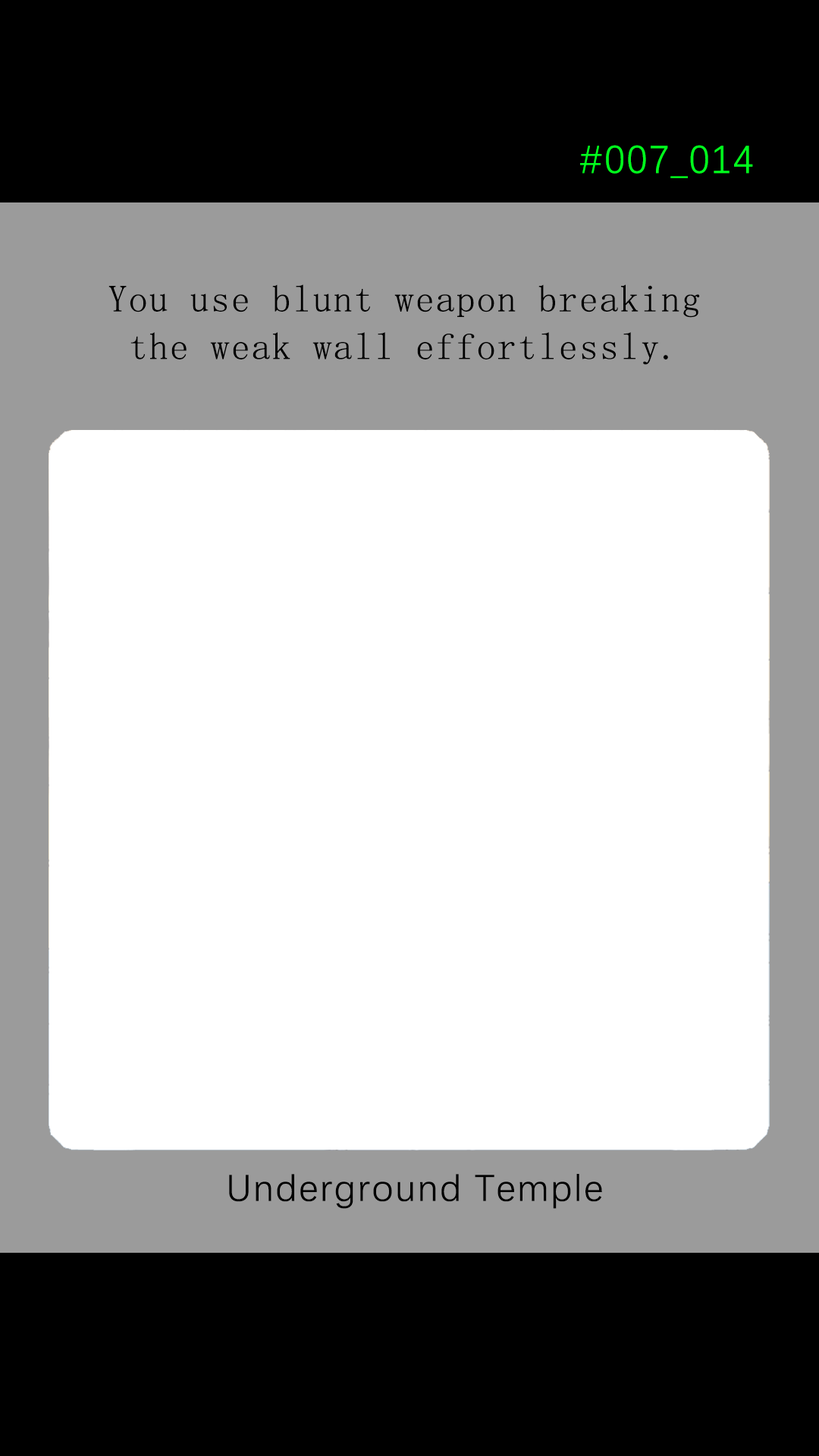
<style>
.page{position:relative;width:819px;height:1456px;background:#ffffff}
.page>*{position:absolute;margin:0}
.t1{font:39.2px "DengXian-Regular";letter-spacing:0.04em;color:#00ff1e}
.t2{font:37.9px/47.6px "SimSun";letter-spacing:0.04em;color:#000000}
.t3{font:37.9px "DengXian-Regular";letter-spacing:0.04em;color:#000000}
</style>
<div class="page">
<p class="t1" style="left:580px;top:145px;width:173px;height:33px">#007_014</p>
<p class="t2" style="left:108px;top:284px;width:592px;height:81px;text-align:center">You use blunt weapon breaking <br>the weak wall effortlessly.</p>
<p class="t3" style="left:229px;top:1174px;width:373px;height:35px">Underground Temple</p>
</div>
